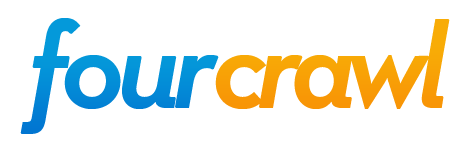
<style>
.page{position:relative;width:470px;height:150px;background:#ffffff}
.page>*{position:absolute;margin:0}
.t1{font:119.6px "NeutraText-DemiItalic";letter-spacing:-0.08em;color:#0499da;font-weight:bold}
.t2{font:119.6px "NeutraText-DemiItalic";letter-spacing:-0.1em;color:#f89406;font-weight:bold}
</style>
<div class="page">
<p class="t1" style="left:20px;top:18px;width:199px;height:116px">four</p>
<p class="t2" style="left:215px;top:19px;width:235px;height:90px">crawl</p>
</div>
